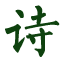
<style>
.page{position:relative;width:64px;height:64px;background:#ffffff}
.page>*{position:absolute;margin:0}
.t1{font:60px "FZSXSLKJW--GB1-0";letter-spacing:0.34em;color:#0e410e}
</style>
<div class="page">
<p class="t1" style="left:5px;top:5px;width:55px;height:52px">诗</p>
</div>
